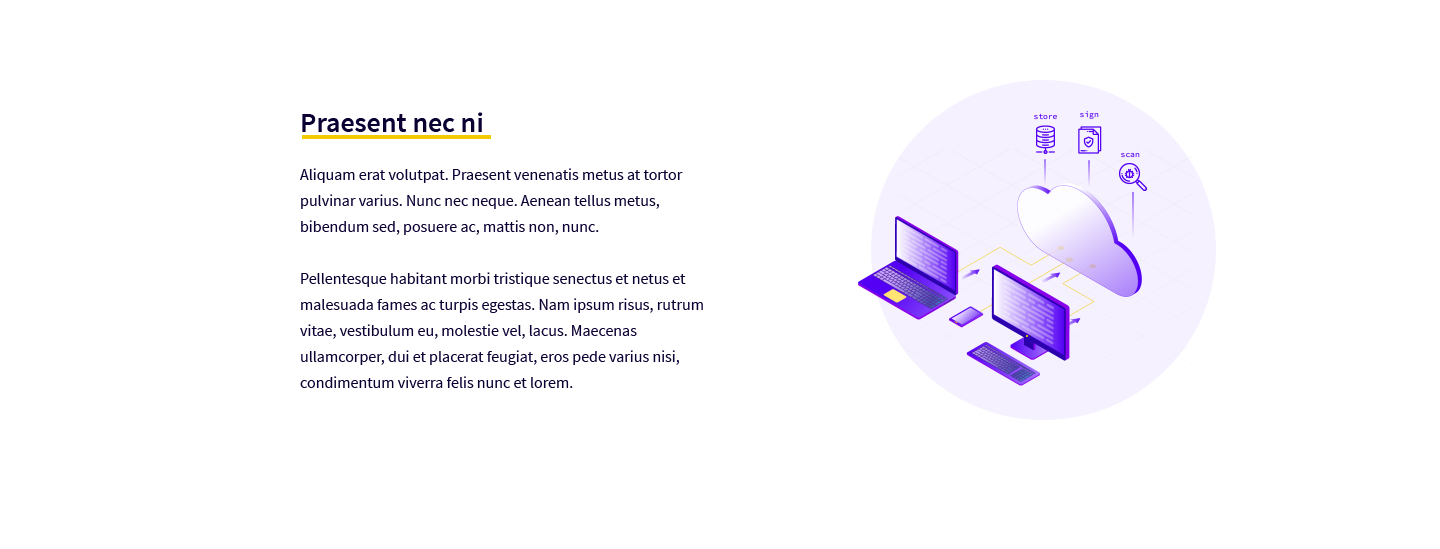
<style>
.page{position:relative;width:1440px;height:549px;background:#ffffff}
.page>*{position:absolute;margin:0}
.t1{font:28px "SourceSansPro-SemiBold";color:#0c0033}
.t2{font:16px/26px "SourceSansPro-Regular";color:#0c0033}
</style>
<div class="page">
<p class="t1" style="left:302px;top:112px;width:181px;height:20px">Praesent nec ni</p>
<p class="t2" style="left:300px;top:168px;width:403px;height:220px">Aliquam erat volutpat. Praesent venenatis metus at tortor pulvinar varius. Nunc nec neque. Aenean tellus metus, bibendum sed, posuere ac, mattis non, nunc. <br><br>Pellentesque habitant morbi tristique senectus et netus et malesuada fames ac turpis egestas. Nam ipsum risus, rutrum vitae, vestibulum eu, molestie vel, lacus. Maecenas ullamcorper, dui et placerat feugiat, eros pede varius nisi, condimentum viverra felis nunc et lorem.</p>
</div>
